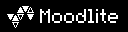
<style>
.page{position:relative;width:128px;height:32px;background:#000000}
.page>*{position:absolute;margin:0}
.t1{font:16px "NinePin";letter-spacing:0.14em;color:#ffffff}
.t2{font:16px "NinePin";color:#ffffff}
.t3{font:16px "NinePin";letter-spacing:-0.26em;color:#ffffff}
.t4{font:16px "NinePin";letter-spacing:0.02em;color:#ffffff}
</style>
<div class="page">
<p class="t1" style="left:40px;top:9px;width:78px;height:14px">Moo<span class="t2">d</span><span class="t3">li</span><span class="t4">t</span><span class="t2">e</span></p>
</div>
